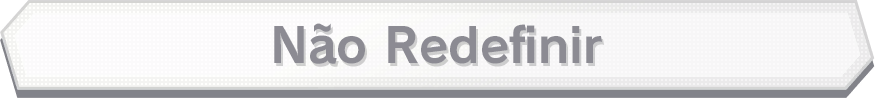
<style>
.page{position:relative;width:875px;height:98px}
.page>*{position:absolute;margin:0}
.t1{font:48px "RodinPro-B";color:#8c8b93}
</style>
<div class="page">
<p class="t1" style="left:274px;top:23px;width:328px;height:41px">Não Redefinir</p>
</div>
